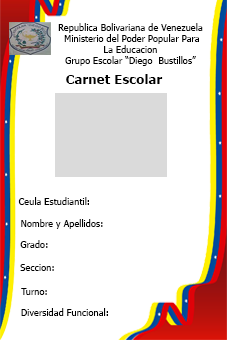
<style>
.page{position:relative;width:227px;height:340px;background:#ffffff}
.page>*{position:absolute;margin:0}
.t1{font:9.3px "Tahoma";color:#000000}
.t2{font:13.3px "Tahoma-Bold";color:#000000}
</style>
<div class="page">
<p class="t1" style="left:58px;top:23px;width:145px;height:43px;text-align:center">Republica Bolivariana de Venezuela<br> Ministerio del Poder Popular Para<br>La Educacion<br>Grupo Escolar “Diego  Bustillos”</p>
<p class="t2" style="left:66px;top:74px;width:97px;height:10px">Carnet Escolar</p>
<p class="t1" style="left:18px;top:197px;width:71px;height:8px">Ceula Estudiantil:</p>
<p class="t1" style="left:21px;top:219px;width:82px;height:10px">Nombre y Apellidos:</p>
<p class="t1" style="left:20px;top:240px;width:28px;height:8px">Grado:</p>
<p class="t1" style="left:20px;top:264px;width:34px;height:7px">Seccion:</p>
<p class="t1" style="left:21px;top:288px;width:26px;height:7px">Turno:</p>
<p class="t1" style="left:21px;top:308px;width:87px;height:8px">Diversidad Funcional:</p>
</div>
